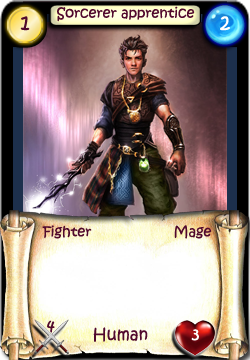
<style>
.page{position:relative;width:250px;height:360px}
.page>*{position:absolute;margin:0}
.t1{font:14px "KristenITC-Regular";color:#51092d}
.t2{font:20px "KristenITC-Regular";color:#51092d}
.t3{font:20px "KristenITC-Regular";color:#ffffff}
.t4{font:16px "KristenITC-Regular";color:#51092d}
.t5{font:16px "KristenITC-Regular";color:#fefefe}
</style>
<div class="page">
<p class="t1" style="left:57px;top:6px;width:138px;height:16px">Sorcerer apprentice</p>
<p class="t2" style="left:20px;top:16px;width:10px;height:15px">1</p>
<p class="t3" style="left:220px;top:16px;width:10px;height:15px">2</p>
<p class="t1" style="left:42px;top:225px;width:50px;height:14px">Fighter</p>
<p class="t1" style="left:174px;top:225px;width:38px;height:14px">Mage</p>
<p class="t4" style="left:47px;top:320px;width:8px;height:13px">4</p>
<p class="t4" style="left:93px;top:327px;width:55px;height:15px">Human</p>
<p class="t5" style="left:191px;top:329px;width:8px;height:12px">3</p>
</div>
